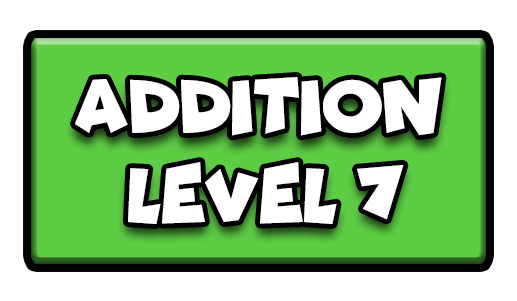
<style>
.page{position:relative;width:517px;height:301px;background:#ffffff}
.page>*{position:absolute;margin:0}
.t1{font:77.7px "Funhouse";color:#ffffff;scale:0.95 1}
</style>
<div class="page">
<p class="t1" style="left:75px;top:77px;width:367px;height:59px">ADDITION</p>
<p class="t1" style="left:128px;top:162px;width:276px;height:62px">LEVEL 7</p>
</div>
